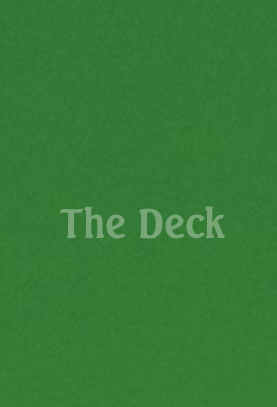
<style>
.page{position:relative;width:277px;height:407px}
.page>*{position:absolute;margin:0}
.t1{font:40px "Seagull-Bold";color:#78a678}
</style>
<div class="page">
<p class="t1" style="left:59px;top:206px;width:166px;height:33px">The Deck</p>
</div>
